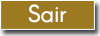
<style>
.page{position:relative;width:100px;height:36px;background:#9d7922}
.page>*{position:absolute;margin:0}
.t1{font:24px "Arcon-Regular";color:#ffffff}
</style>
<div class="page">
<p class="t1" style="left:28px;top:4px;width:39px;height:19px">Sair</p>
</div>
